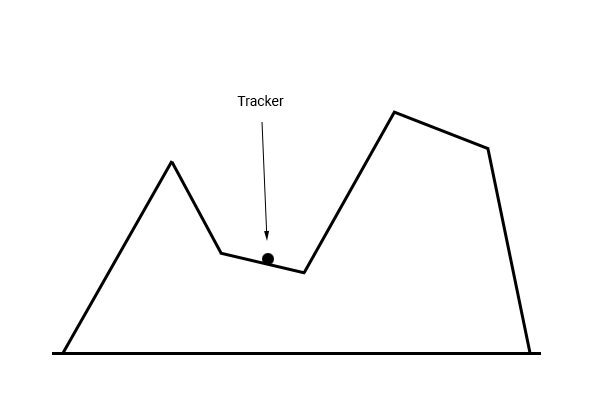
<style>
.page{position:relative;width:600px;height:420px;background:#ffffff}
.page>*{position:absolute;margin:0}
.t1{font:14px "Roboto-Regular";color:#000000}
</style>
<div class="page">
<p class="t1" style="left:237px;top:95px;width:47px;height:11px">Tracker</p>
</div>
